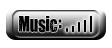
<style>
.page{position:relative;width:112px;height:48px;background:#ffffff}
.page>*{position:absolute;margin:0}
.t1{font:18px "YouAreLoved";color:#000000}
</style>
<div class="page">
<p class="t1" style="left:19px;top:15px;width:43px;height:18px">Music:</p>
</div>
